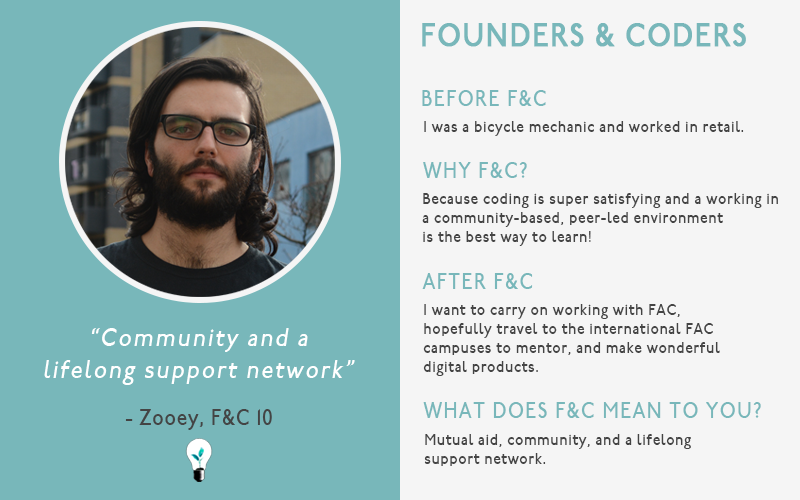
<style>
.page{position:relative;width:800px;height:500px;background:#f5f5f5}
.page>*{position:absolute;margin:0}
.t1{font:32px "P22UndergroundMedium";letter-spacing:0.05em;color:#78b7ba;font-weight:bold;scale:0.86 1}
.t2{font:22px "P22UndergroundMedium";letter-spacing:0.075em;color:#78b7ba;scale:0.86 1}
.t3{font:16px "P22UndergroundMedium";letter-spacing:0.05em;color:#444444;scale:0.86 1}
.t4{font:26px "P22UndergroundMedium";letter-spacing:0.075em;color:#ffffff;font-style:italic;scale:0.86 1}
.t5{font:22px "P22UndergroundMedium";letter-spacing:0.05em;color:#444444;scale:0.86 1}
</style>
<div class="page">
<p class="t1" style="left:422px;top:23px;width:324px;height:24px">FOUNDERS &amp; CODERS</p>
<p class="t2" style="left:422px;top:90px;width:124px;height:16px">BEFORE F&amp;C</p>
<p class="t3" style="left:424px;top:121px;width:320px;height:15px">I was a bicycle mechanic and worked in retail.</p>
<p class="t2" style="left:423px;top:162px;width:104px;height:16px">WHY F&amp;C?</p>
<p class="t3" style="left:422px;top:193px;width:356px;height:53px">Because coding is super satisfying and a working in  <br>a community-based, peer-led environment <br>is the best way to learn!</p>
<p class="t2" style="left:422px;top:273px;width:111px;height:16px">AFTER F&amp;C</p>
<p class="t3" style="left:423px;top:304px;width:297px;height:72px">I want to carry on working with FAC, <br>hopefully travel to the international FAC <br>campuses to mentor, and make wonderful <br>digital products.</p>
<p class="t4" style="left:44px;top:328px;width:311px;height:57px;text-align:center">“Community and a<br>lifelong support network”</p>
<p class="t5" style="left:125px;top:409px;width:147px;height:21px">- Zooey, F&amp;C 10</p>
<p class="t2" style="left:423px;top:402px;width:338px;height:16px">WHAT DOES F&amp;C MEAN TO YOU?</p>
<p class="t3" style="left:424px;top:434px;width:267px;height:32px">Mutual aid, community, and a lifelong <br>support network.</p>
</div>
